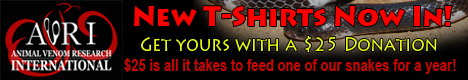
<style>
.page{position:relative;width:468px;height:80px;background:#000000}
.page>*{position:absolute;margin:0}
.t1{font:27.1px "LithosPro-Black";color:#fc0000}
.t2{font:18.9px "LithosPro-Regular";color:#e5f815;scale:0.89 1}
.t3{font:15.8px "Arial-BoldMT";color:#c60505;scale:0.83 1}
</style>
<div class="page">
<p class="t1" style="left:134px;top:6px;width:318px;height:21px">New T-Shirts Now In!</p>
<p class="t2" style="left:141px;top:36px;width:296px;height:17px">Get yours with a $25 Donation</p>
<p class="t3" style="left:124px;top:58px;width:332px;height:16px">$25 is all it takes to feed one of our snakes for a year!</p>
</div>
